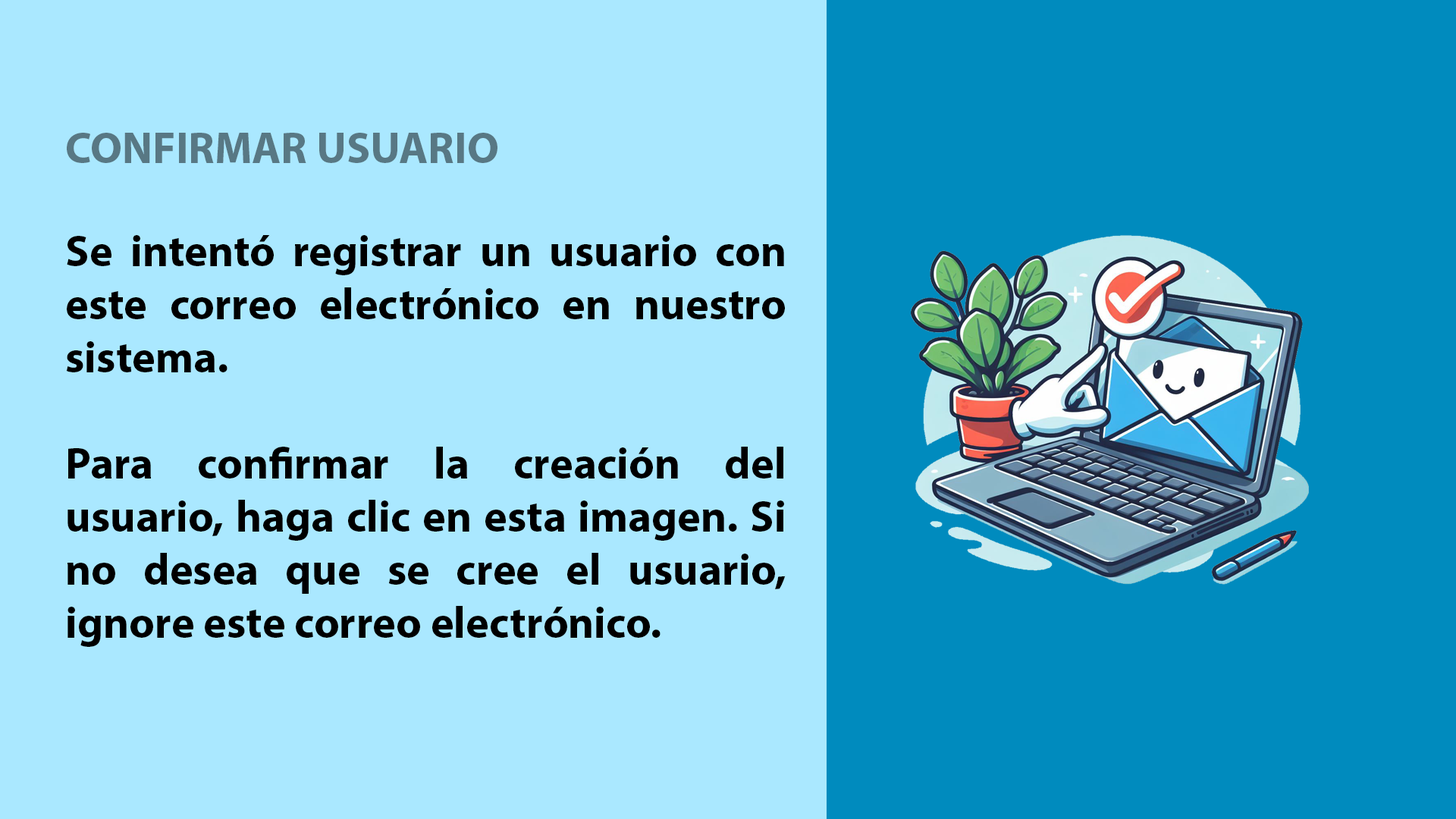
<style>
.page{position:relative;width:1456px;height:819px;background:#aae8ff}
.page>*{position:absolute;margin:0}
.t1{font:44.2px "MyriadPro-Bold";color:#587884}
.t2{font:44.2px "MyriadPro-Bold";color:#000000}
</style>
<div class="page">
<p class="t1" style="left:67px;top:133px;width:430px;height:30px">CONFIRMAR USUARIO</p>
<p class="t2" style="left:66px;top:235px;width:720px;height:412px;text-align:justify">Se intentó registrar un usuario con este correo electrónico en nuestro sistema.<br><br>Para confirmar la creación del usuario, haga clic en esta imagen. Si no desea que se cree el usuario, ignore este correo electrónico.</p>
</div>
